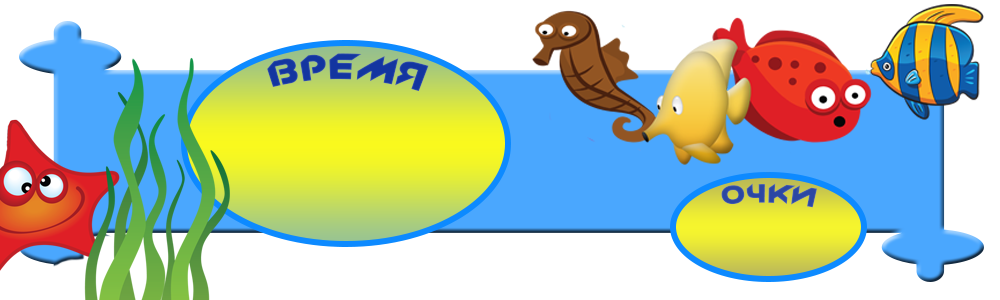
<style>
.page{position:relative;width:1000px;height:300px;background:#ffffff}
.page>*{position:absolute;margin:0}
.t1{font:35px "New_Zelek";color:#1335a0;scale:1.07 1}
.t2{font:25px "New_Zelek";color:#2b47a3;scale:1.07 1}
</style>
<div class="page">
<p class="t1" style="left:267px;top:53px;width:162px;height:39px;rotate:1deg">ВРЕМЯ</p>
<p class="t2" style="left:721px;top:183px;width:96px;height:25px;rotate:1deg">ОЧКИ</p>
</div>
